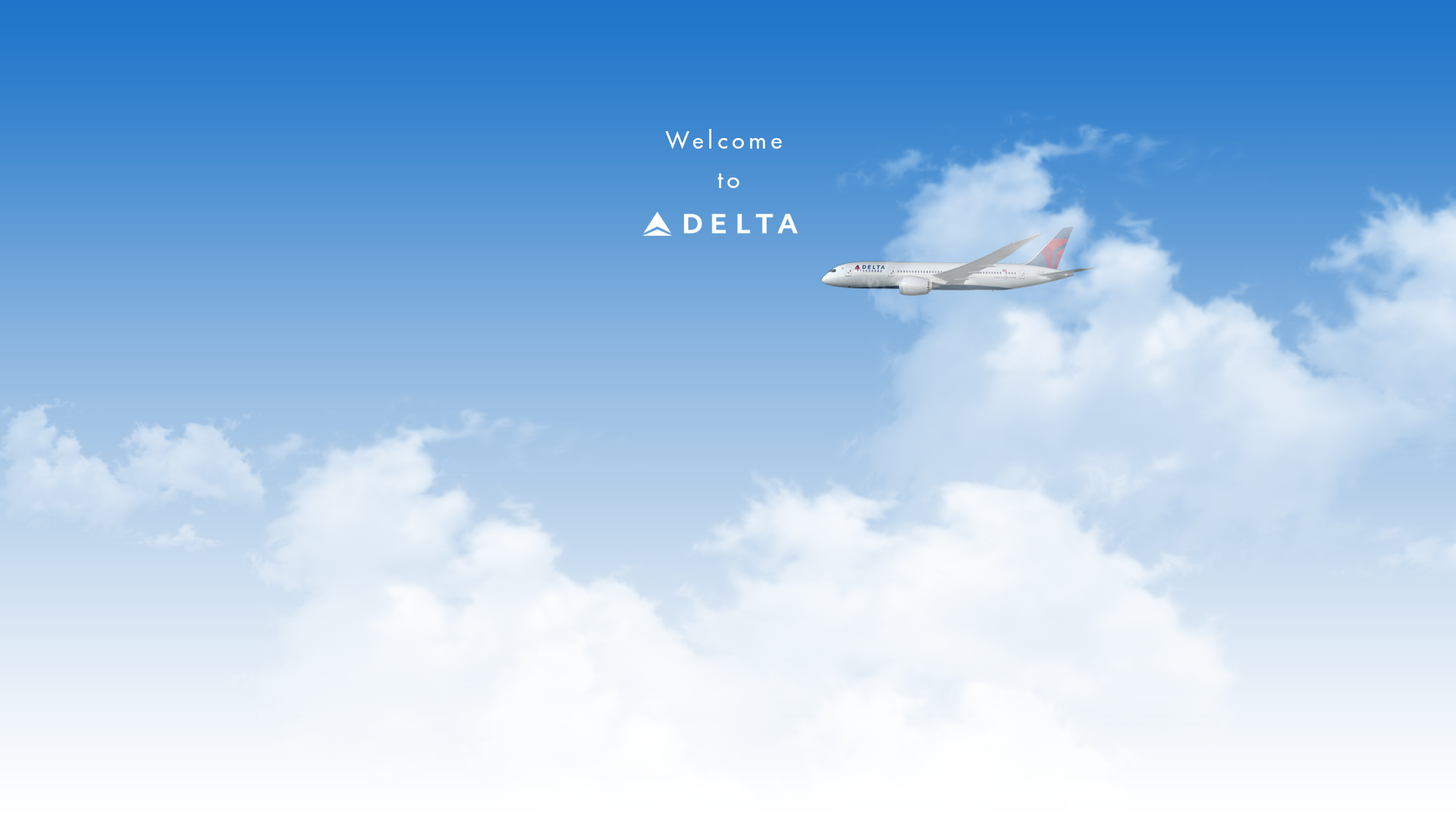
<style>
.page{position:relative;width:1456px;height:819px}
.page>*{position:absolute;margin:0}
.t1{font:22.7px "FuturaStd-Medium";letter-spacing:0.2em;color:#ffffff}
</style>
<div class="page">
<p class="t1" style="left:665px;top:129px;width:117px;height:20px">Welcome</p>
<p class="t1" style="left:717px;top:173px;width:22px;height:15px">to</p>
</div>
